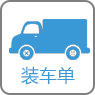
<style>
.page{position:relative;width:95px;height:95px;background:#ffffff}
.page>*{position:absolute;margin:0}
.t1{font:18px "MicrosoftYaHei";color:#3998d6}
</style>
<div class="page">
<p class="t1" style="left:21px;top:66px;width:54px;height:19px">装车单</p>
</div>
